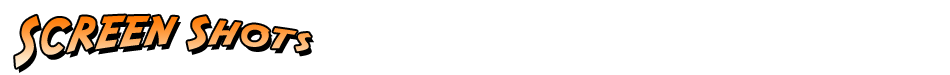
<style>
.page{position:relative;width:950px;height:75px;background:#ffffff}
.page>*{position:absolute;margin:0}
.t1{font:48px "Adventure";letter-spacing:-0.025em}
</style>
<div class="page">
<p class="t1" style="left:15px;top:15px;width:296px;height:53px">Screen Shots</p>
</div>
